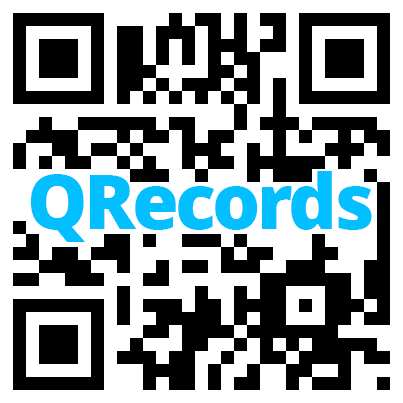
<style>
.page{position:relative;width:403px;height:403px;background:#ffffff}
.page>*{position:absolute;margin:0}
.t1{font:76px "OpenSans-Extrabold";letter-spacing:-0.05em;color:#04bfff}
</style>
<div class="page">
<p class="t1" style="left:30px;top:171px;width:342px;height:71px">QRecords</p>
</div>
